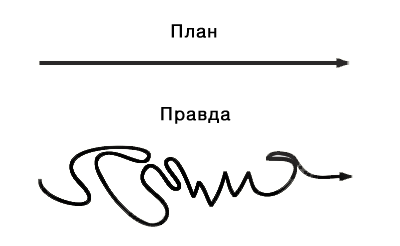
<style>
.page{position:relative;width:400px;height:246px;background:#ffffff}
.page>*{position:absolute;margin:0}
.t1{font:18px "HelveticaNeue";letter-spacing:0.05em;color:#000000;font-weight:bold}
</style>
<div class="page">
<p class="t1" style="left:171px;top:24px;width:46px;height:14px">План</p>
<p class="t1" style="left:161px;top:107px;width:70px;height:17px">Правда</p>
</div>
